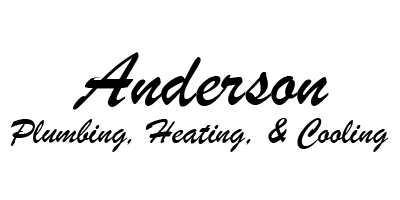
<style>
.page{position:relative;width:400px;height:200px;background:#ffffff}
.page>*{position:absolute;margin:0}
.t1{font:83.3px "BrushScriptMT";color:#000000}
.t2{font:37.5px "BrushScriptMT";color:#000000}
</style>
<div class="page">
<p class="t1" style="left:73px;top:52px;width:256px;height:58px">Anderson</p>
<p class="t2" style="left:10px;top:118px;width:379px;height:34px">Plumbing, Heating, &amp; Cooling</p>
</div>
